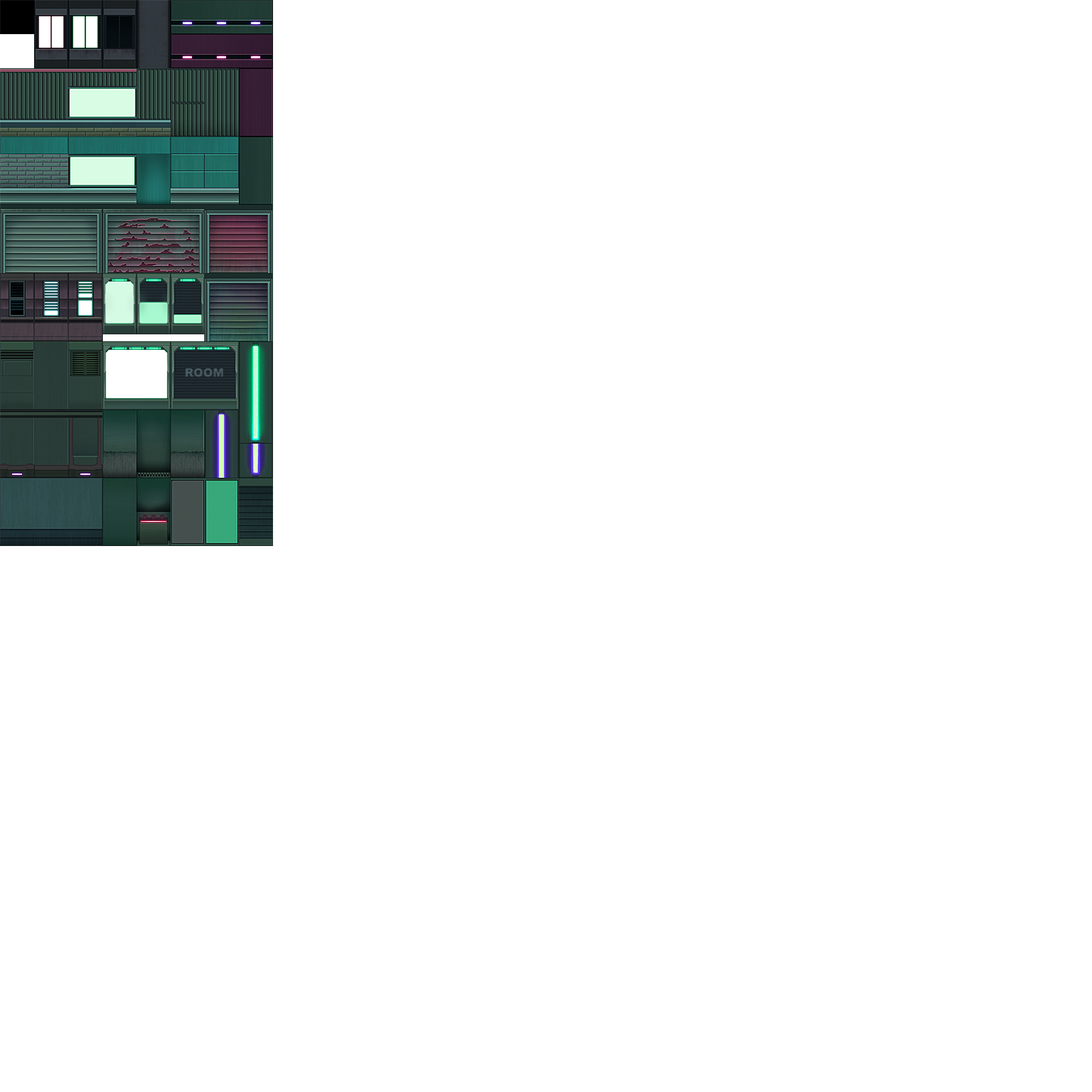
<style>
.page{position:relative;width:1092px;height:1092px;background:#ffffff}
.page>*{position:absolute;margin:0}
.t1{font:11.7px "Arial-Black";color:#415359}
</style>
<div class="page">
<p class="t1" style="left:185px;top:367px;width:38px;height:9px">ROOM</p>
</div>
